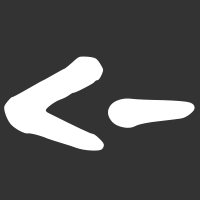
<style>
.page{position:relative;width:200px;height:200px;background:#333333}
.page>*{position:absolute;margin:0}
.t1{font:216.8px "emilyyyyyy";color:#ffffff}
</style>
<div class="page">
<p class="t1" style="left:4px;top:56px;width:191px;height:95px">&lt;-</p>
</div>
